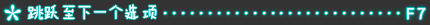
<style>
.page{position:relative;width:430px;height:25px;background:#333333}
.page>*{position:absolute;margin:0}
.t1{font:18px "¢è?";color:#ffffff}
</style>
<div class="page">
<p class="t1" style="left:28px;top:4px;width:129px;height:16px">跳跃至下一个选项</p>
</div>
